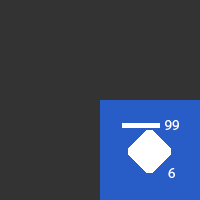
<style>
.page{position:relative;width:200px;height:200px;background:#333333}
.page>*{position:absolute;margin:0}
.t1{font:14px "MyriadPro-Regular";color:#ffffff}
</style>
<div class="page">
<p class="t1" style="left:165px;top:120px;width:14px;height:10px">99</p>
<p class="t1" style="left:168px;top:168px;width:7px;height:10px">6</p>
</div>
